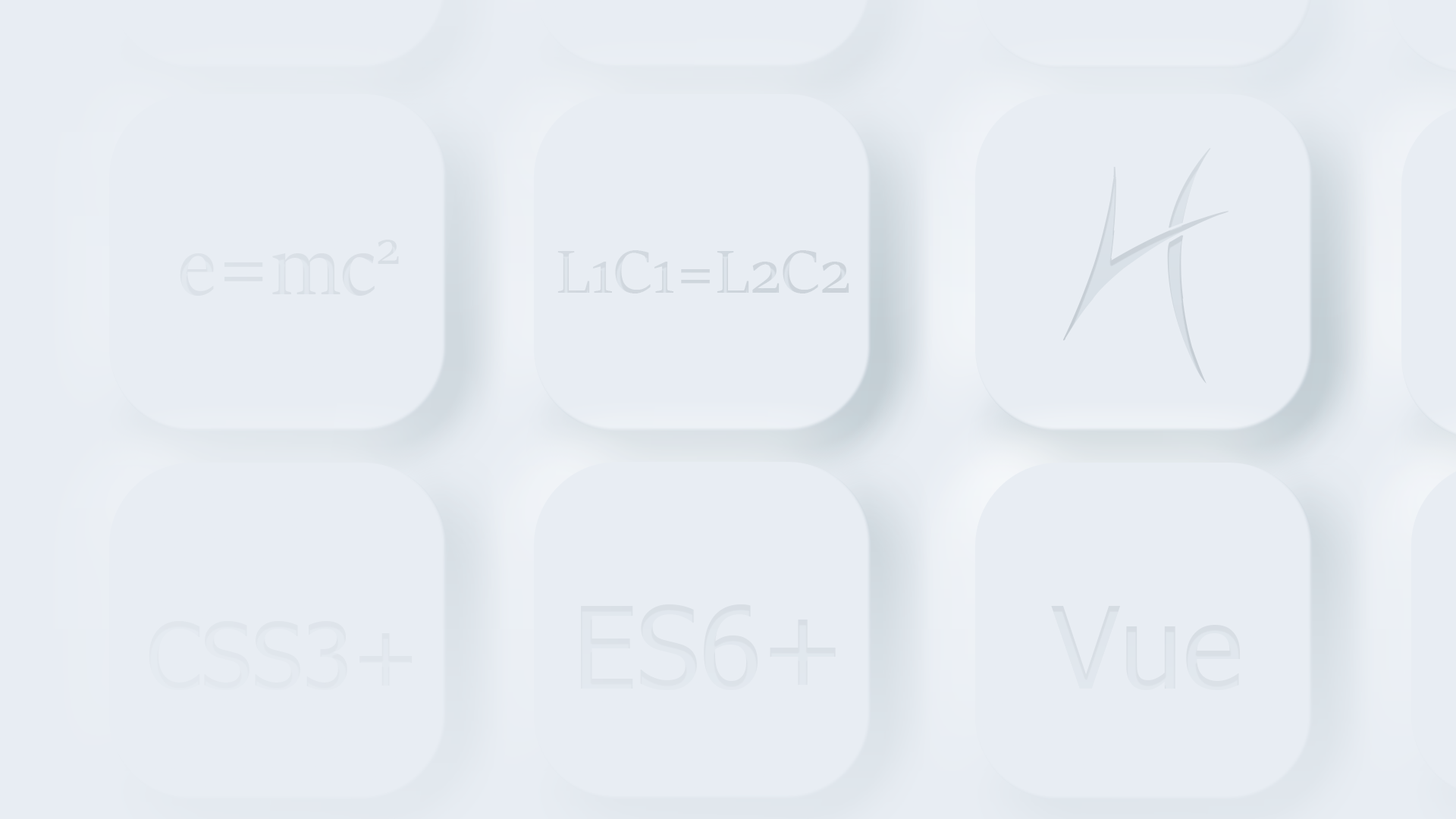
<style>
.page{position:relative;width:1456px;height:819px;background:#e8edf3}
.page>*{position:absolute;margin:0}
.t1{font:227.5px "Threadz-Needle";color:#d7dfe6}
.t2{font:91px "SitkaBanner";color:#d7dfe6}
.t3{font:68.2px "SitkaBanner";color:#d7dfe6}
.t4{font:68.2px "SitkaBanner";color:#d7dfe6;font-variant:small-caps}
.t5{font:113.7px "Tahoma";color:#d7dfe6}
.t6{font:91px "Tahoma";color:#d7dfe6}
</style>
<div class="page">
<p class="t1" style="left:1063px;top:148px;width:165px;height:236px">H</p>
<p class="t2" style="left:180px;top:240px;width:219px;height:56px">e=mc2</p>
<p class="t3" style="left:557px;top:250px;width:292px;height:43px">L<span class="t4">1</span>C<span class="t4">1</span>=L<span class="t4">2</span>C<span class="t4">2</span></p>
<p class="t5" style="left:581px;top:604px;width:255px;height:86px">ES6+</p>
<p class="t5" style="left:1051px;top:606px;width:189px;height:84px">Vue</p>
<p class="t6" style="left:149px;top:621px;width:264px;height:69px">CSS3+</p>
</div>
